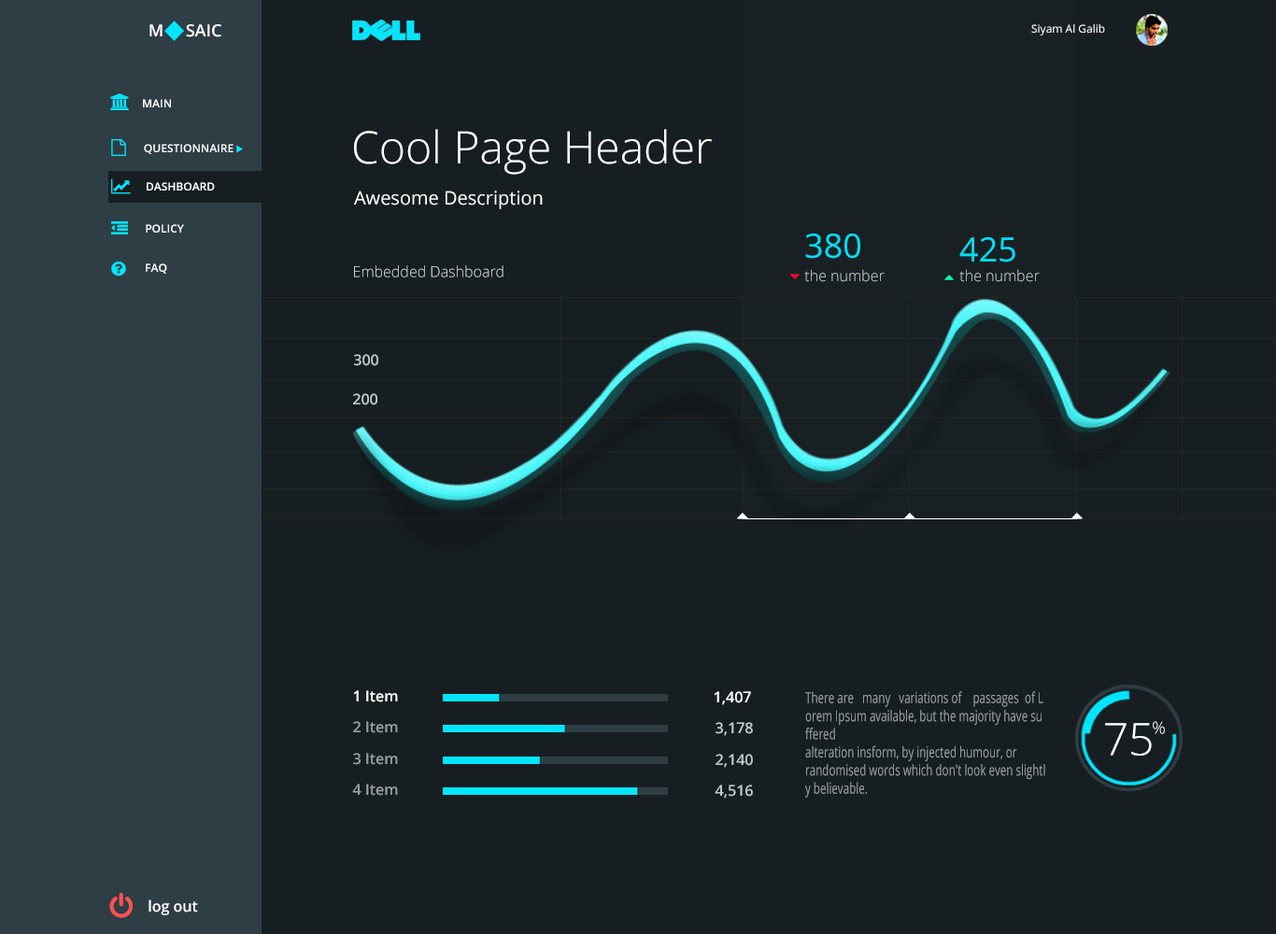
<style>
.page{position:relative;width:1276px;height:934px;background:#171e21}
.page>*{position:absolute;margin:0}
.t1{font:16.8px "OpenSans-Semibold";color:#ffffff}
.t2{font:11.2px "OpenSans";color:#ffffff}
.t3{font:11.2px "OpenSans-Semibold";color:#ffffff}
.t4{font:44.8px "OpenSans-Light";color:#ffffff}
.t5{font:18.7px "OpenSans";color:#ffffff}
.t6{font:11.2px "OpenSans-Semibold";color:#feffff}
.t7{font:33.6px "OpenSans";color:#00e5ff}
.t8{font:14.9px "OpenSans-Light";color:#cfd8dc}
.t9{font:14.9px "OpenSans-Semibold";color:#bfc7cb}
.t10{font:14.9px "OpenSans-Semibold";color:#ffffff}
.t11{font:15.1px "OpenSans";color:#989da0;scale:0.72 1}
.t12{font:14.9px "OpenSans-Semibold";color:#989da0}
.t13{font:16.8px "OpenSans-Light"}
</style>
<div class="page">
<p class="t1" style="left:149px;top:24px;width:72px;height:13px">M     SAIC</p>
<p class="t2" style="left:1031px;top:24px;width:74px;height:12px">Siyam Al Galib</p>
<p class="t3" style="left:143px;top:99px;width:28px;height:8px">MAIN</p>
<p class="t4" style="left:354px;top:129px;width:358px;height:46px">Cool Page Header</p>
<p class="t3" style="left:144px;top:144px;width:90px;height:10px">QUESTIONNAIRE</p>
<p class="t3" style="left:147px;top:182px;width:68px;height:9px">DASHBOARD</p>
<p class="t5" style="left:354px;top:191px;width:189px;height:18px">Awesome Description</p>
<p class="t6" style="left:146px;top:224px;width:38px;height:9px">POLICY</p>
<p class="t7" style="left:805px;top:234px;width:56px;height:25px">380</p>
<p class="t7" style="left:960px;top:237px;width:56px;height:26px">425</p>
<p class="t3" style="left:146px;top:263px;width:21px;height:11px">FAQ</p>
<p class="t8" style="left:354px;top:265px;width:150px;height:12px">Embedded Dashboard</p>
<p class="t8" style="left:804px;top:269px;width:81px;height:13px">the number</p>
<p class="t8" style="left:960px;top:269px;width:80px;height:13px">the number</p>
<p class="t9" style="left:354px;top:354px;width:24px;height:12px">300</p>
<p class="t9" style="left:353px;top:393px;width:24px;height:12px">200</p>
<p class="t10" style="left:353px;top:690px;width:45px;height:13px">1 Item</p>
<p class="t10" style="left:714px;top:691px;width:37px;height:14px">1,407</p>
<p class="t11" style="left:805px;top:691px;width:240px;height:107px">There are   many   variations of    passages  of L<br>orem Ipsum available, but the majority have su<br>ffered <br>alteration insform, by injected humour, or <br>randomised words which don't look even slightl<br>y believable.</p>
<p class="t12" style="left:353px;top:721px;width:45px;height:12px">2 Item</p>
<p class="t9" style="left:716px;top:722px;width:37px;height:14px">3,178</p>
<p class="t4" style="left:1105px;top:723px;width:47px;height:33px">75</p>
<p class="t13" style="left:1153px;top:721px;width:12px;height:13px">%</p>
<p class="t12" style="left:353px;top:753px;width:45px;height:12px">3 Item</p>
<p class="t9" style="left:716px;top:754px;width:37px;height:14px">2,140</p>
<p class="t12" style="left:352px;top:784px;width:46px;height:12px">4 Item</p>
<p class="t9" style="left:715px;top:785px;width:38px;height:14px">4,516</p>
<p class="t10" style="left:149px;top:900px;width:49px;height:16px">log out</p>
</div>
